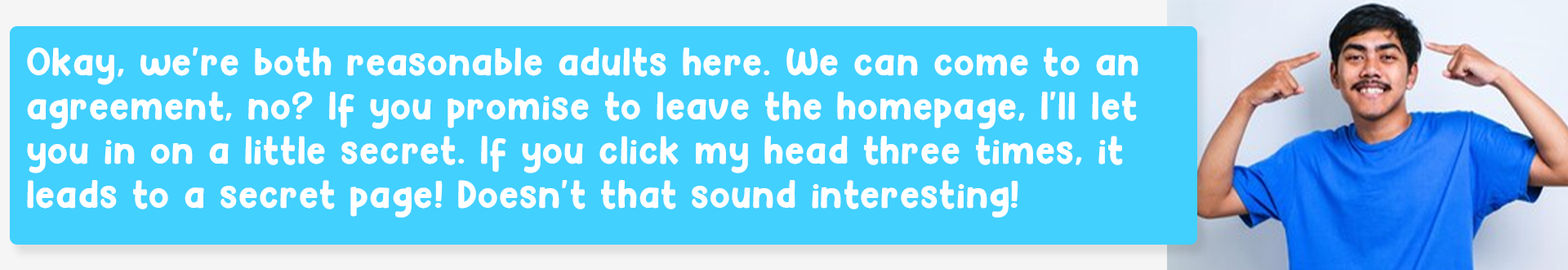
<style>
.page{position:relative;width:1568px;height:270px;background:#42d0ff}
.page>*{position:absolute;margin:0}
.t1{font:36.8px "Hey-Comic";letter-spacing:0.025em;color:#ffffff}
</style>
<div class="page">
<p class="t1" style="left:27px;top:47px;width:1111px;height:170px">Okay, we're both reasonable adults here. We can come to an agreement, no? If you promise to leave the homepage, I'll let you in on a little secret. If you click my head three times, it leads to a secret page! Doesn't that sound interesting!</p>
</div>
